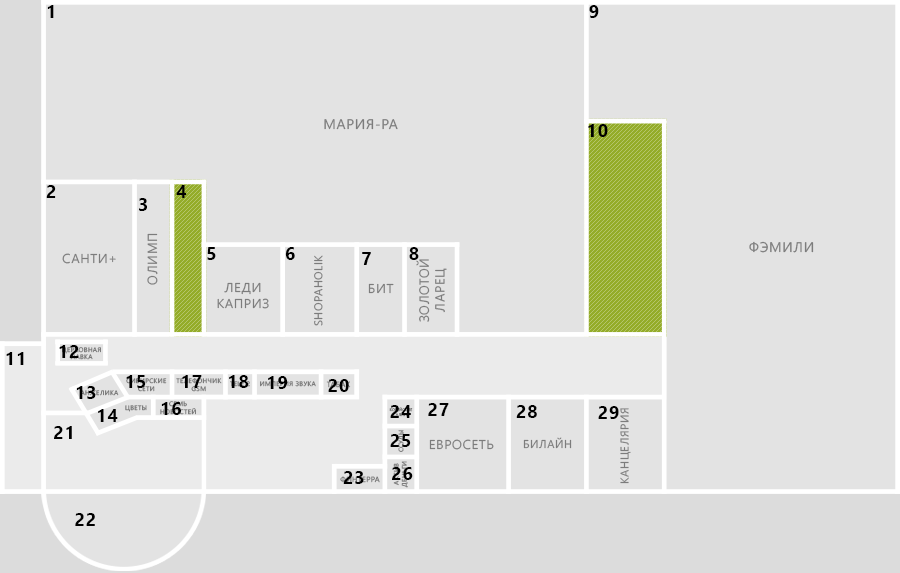
<style>
.page{position:relative;width:900px;height:573px;background:#e3e3e3}
.page>*{position:absolute;margin:0}
.t1{font:18px "SegoeUI-Bold";letter-spacing:0.05em;color:#000000;text-transform:uppercase}
.t2{font:14px "SegoeUI";letter-spacing:0.05em;color:#7c7c7c;text-transform:uppercase}
.t3{font:13.1px "SegoeUI";letter-spacing:0.05em;color:#7c7c7c;text-transform:uppercase}
.t4{font:11.2px "SegoeUI";letter-spacing:0.05em;color:#7c7c7c;text-transform:uppercase}
.t5{font:6.5px "SegoeUI";letter-spacing:0.05em;color:#7c7c7c;text-transform:uppercase}
.t6{font:6.6px "SegoeUI";letter-spacing:0.05em;color:#7c7c7c;text-transform:uppercase}
</style>
<div class="page">
<p class="t1" style="left:47px;top:5px;width:7px;height:13px">1</p>
<p class="t1" style="left:589px;top:5px;width:10px;height:13px">9</p>
<p class="t2" style="left:324px;top:119px;width:74px;height:11px">Мария-ра</p>
<p class="t1" style="left:588px;top:124px;width:20px;height:13px">10</p>
<p class="t1" style="left:46px;top:185px;width:10px;height:13px">2</p>
<p class="t1" style="left:176px;top:185px;width:11px;height:13px">4</p>
<p class="t1" style="left:139px;top:198px;width:8px;height:13px">3</p>
<p class="t3" style="left:147px;top:233px;width:11px;height:52px;rotate:-90deg">Олимп</p>
<p class="t2" style="left:749px;top:241px;width:65px;height:12px">Фэмили</p>
<p class="t3" style="left:62px;top:253px;width:54px;height:11px">Санти+</p>
<p class="t1" style="left:207px;top:247px;width:9px;height:13px">5</p>
<p class="t1" style="left:285px;top:247px;width:10px;height:13px">6</p>
<p class="t4" style="left:314px;top:255px;width:9px;height:71px;rotate:-90deg">Shopaholik</p>
<p class="t1" style="left:362px;top:252px;width:9px;height:13px">7</p>
<p class="t1" style="left:409px;top:247px;width:10px;height:13px">8</p>
<p class="t3" style="left:416px;top:259px;width:31px;height:63px;text-align:center;rotate:-90deg">Золотой<br>ларец</p>
<p class="t3" style="left:217px;top:282px;width:52px;height:27px;text-align:center">Леди<br>каприз</p>
<p class="t3" style="left:368px;top:283px;width:26px;height:11px">Бит</p>
<p class="t1" style="left:6px;top:352px;width:18px;height:13px">11</p>
<p class="t1" style="left:59px;top:345px;width:20px;height:13px">12</p>
<p class="t5" style="left:62px;top:347px;width:39px;height:13px;text-align:center">Церковная<br>лавка</p>
<p class="t1" style="left:126px;top:375px;width:20px;height:13px">15</p>
<p class="t1" style="left:182px;top:375px;width:20px;height:13px">17</p>
<p class="t1" style="left:229px;top:375px;width:20px;height:13px">18</p>
<p class="t1" style="left:268px;top:376px;width:20px;height:13px">19</p>
<p class="t1" style="left:76px;top:386px;width:20px;height:13px">13</p>
<p class="t5" style="left:80px;top:390px;width:39px;height:6px">Анжелика</p>
<p class="t5" style="left:126px;top:378px;width:41px;height:14px;text-align:center">Сибирские<br>сети</p>
<p class="t5" style="left:176px;top:378px;width:46px;height:14px;text-align:center">Телефончик<br>GSM</p>
<p class="t5" style="left:260px;top:381px;width:56px;height:6px">Империя звука</p>
<p class="t1" style="left:328px;top:379px;width:21px;height:13px">20</p>
<p class="t5" style="left:160px;top:401px;width:36px;height:14px;text-align:center">Семь<br>новостей</p>
<p class="t1" style="left:98px;top:409px;width:20px;height:13px">14</p>
<p class="t5" style="left:125px;top:405px;width:22px;height:7px">Цветы</p>
<p class="t1" style="left:161px;top:402px;width:20px;height:13px">16</p>
<p class="t1" style="left:390px;top:405px;width:21px;height:13px">24</p>
<p class="t1" style="left:428px;top:403px;width:21px;height:13px">27</p>
<p class="t1" style="left:516px;top:405px;width:21px;height:13px">28</p>
<p class="t1" style="left:598px;top:406px;width:21px;height:13px">29</p>
<p class="t4" style="left:620px;top:408px;width:11px;height:76px;rotate:-90deg">Канцелярия</p>
<p class="t1" style="left:54px;top:426px;width:18px;height:13px">21</p>
<p class="t1" style="left:390px;top:434px;width:21px;height:13px">25</p>
<p class="t6" style="left:398px;top:430px;width:7px;height:22px;rotate:-90deg">Ссуды</p>
<p class="t4" style="left:523px;top:437px;width:49px;height:12px">Билайн</p>
<p class="t3" style="left:429px;top:439px;width:65px;height:11px">Евросеть</p>
<p class="t6" style="left:393px;top:461px;width:15px;height:27px;text-align:center;rotate:-90deg">Актив<br>деньги</p>
<p class="t1" style="left:343px;top:471px;width:21px;height:13px">23</p>
<p class="t1" style="left:392px;top:467px;width:21px;height:13px">26</p>
<p class="t1" style="left:75px;top:513px;width:20px;height:13px">22</p>
</div>
